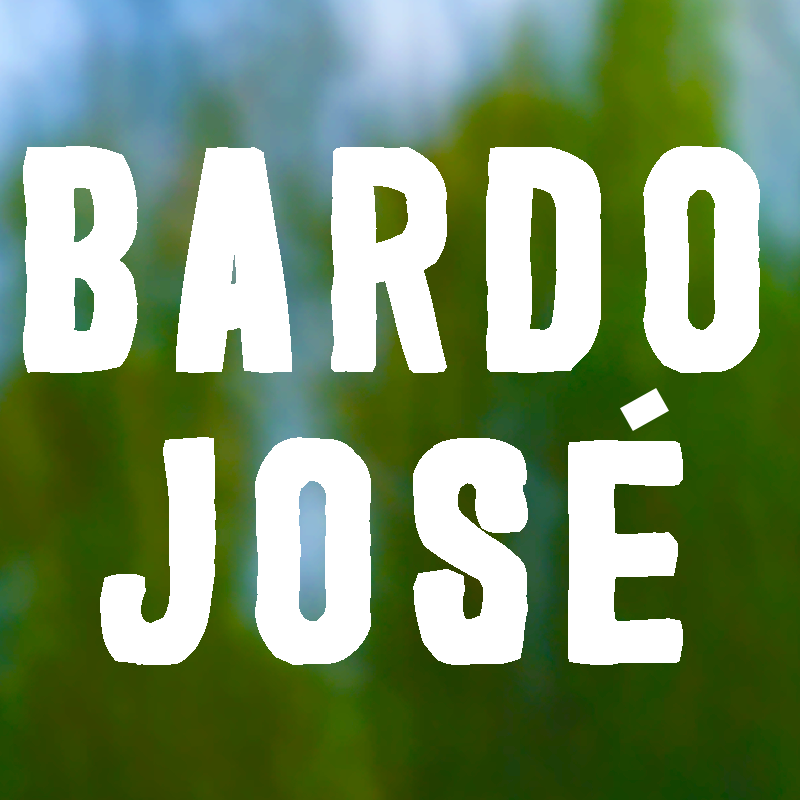
<style>
.page{position:relative;width:800px;height:800px;background:#ffffff}
.page>*{position:absolute;margin:0}
.t1{font:291.7px/291.7px "Marker2";letter-spacing:0.1em;color:#ffffff;font-weight:bold}
</style>
<div class="page">
<p class="t1" style="left:23px;top:146px;width:737px;height:519px;text-align:center">BARDO<br>JOSE</p>
</div>
